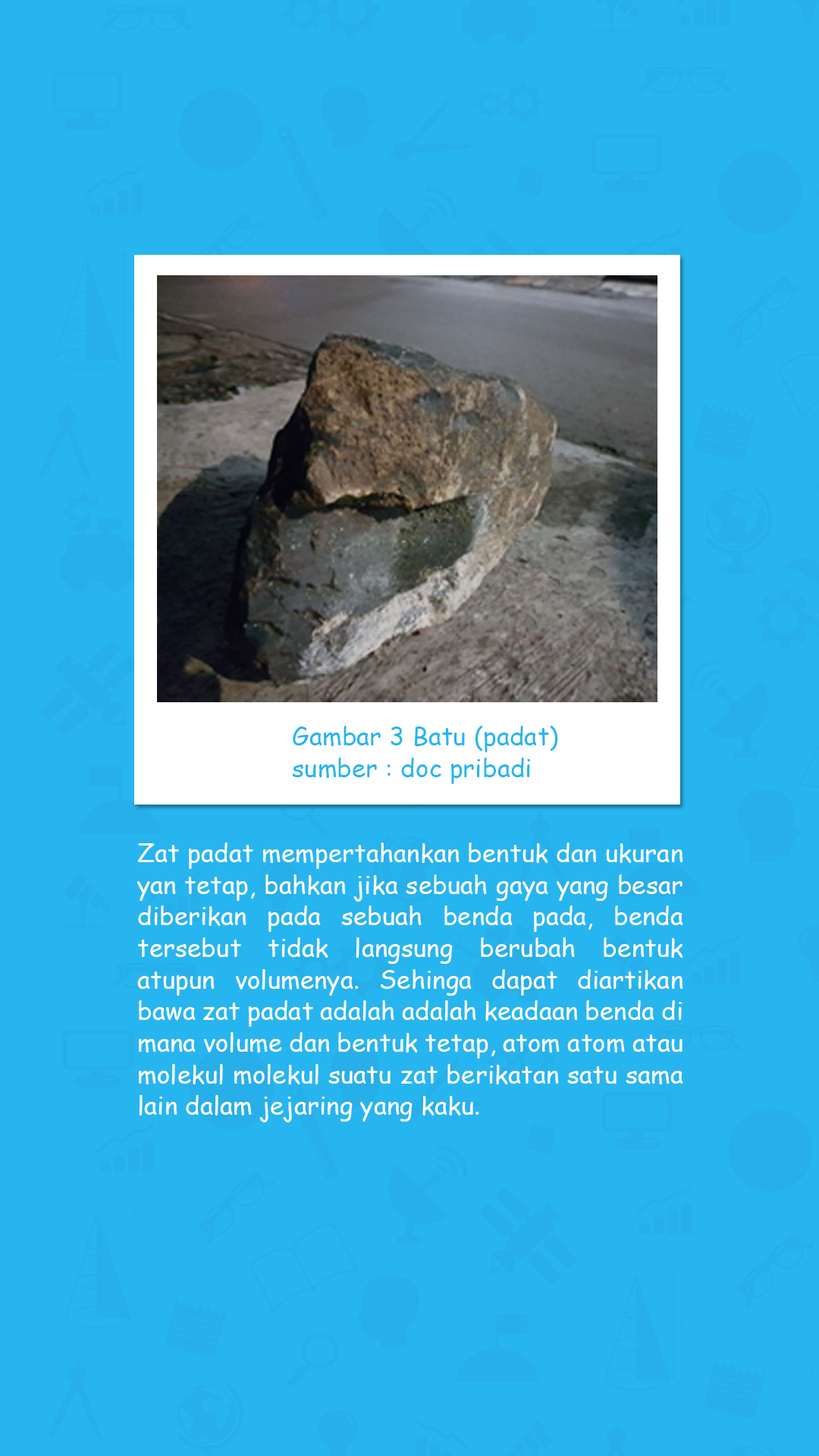
<style>
.page{position:relative;width:819px;height:1456px;background:#27b5ef}
.page>*{position:absolute;margin:0}
.t1{font:25.3px/31.6px "ComicSansMS";color:#27b5ef}
.t2{font:25.3px/31.6px "ComicSansMS";color:#ffffff}
</style>
<div class="page">
<p class="t1" style="left:292px;top:726px;width:266px;height:58px;text-align:justify">Gambar 3 Batu (padat)<br>sumber : doc pribadi</p>
<p class="t2" style="left:137px;top:842px;width:546px;height:280px;text-align:justify">Zat padat mempertahankan bentuk dan ukuran yan tetap, bahkan jika sebuah gaya yang besar diberikan pada sebuah benda pada, benda tersebut tidak langsung berubah bentuk atupun volumenya. Sehinga dapat diartikan bawa zat padat adalah adalah keadaan benda di mana volume dan bentuk tetap, atom atom atau molekul molekul suatu zat berikatan satu sama lain dalam jejaring yang kaku.</p>
</div>
